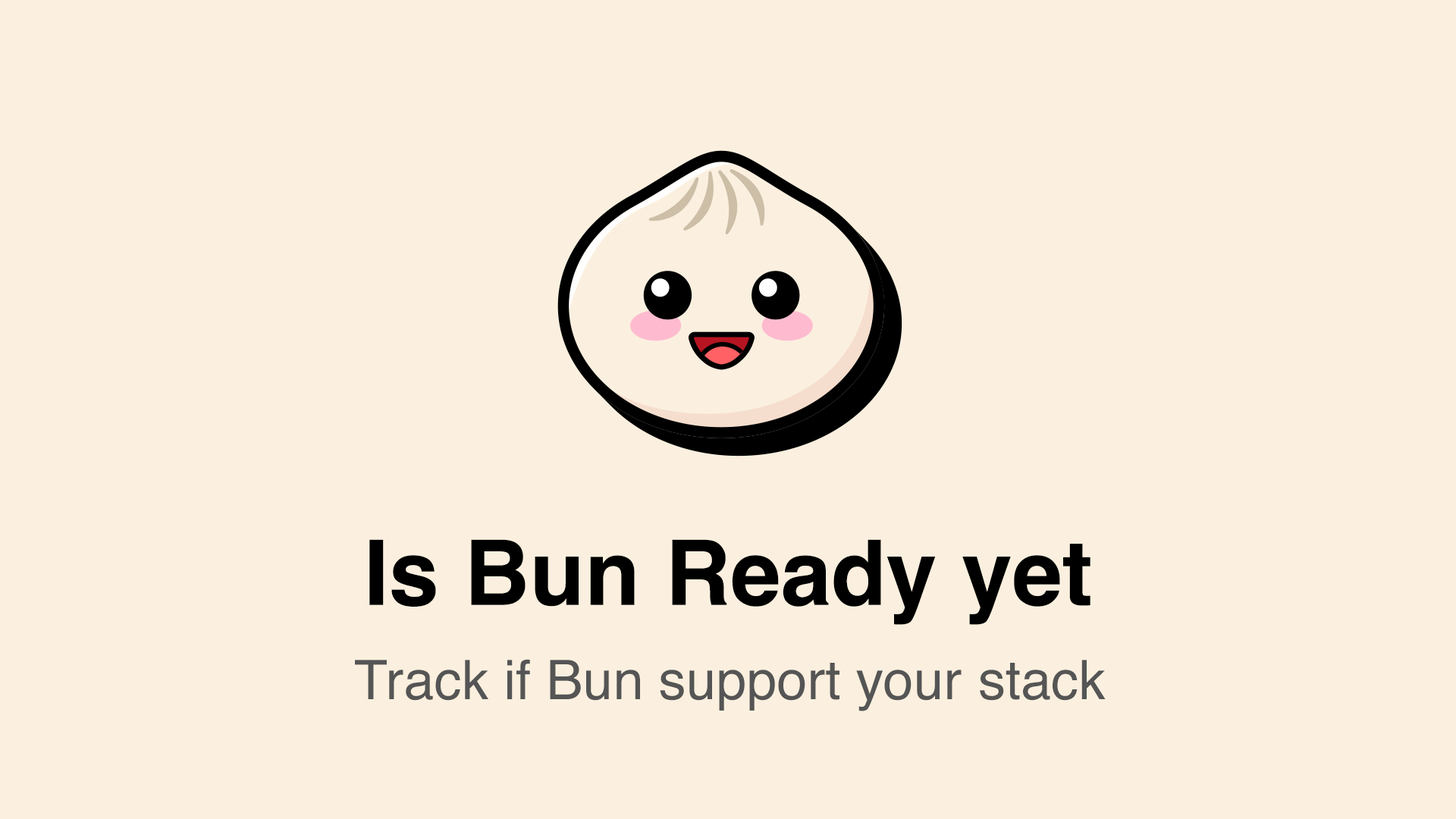
<style>
.page{position:relative;width:1456px;height:819px;background:#fbf0df}
.page>*{position:absolute;margin:0}
.t1{font:90.5px "Helvetica-Bold";color:#000000}
.t2{font:54.6px "Helvetica";color:#555555}
</style>
<div class="page">
<p class="t1" style="left:369px;top:539px;width:721px;height:86px">Is Bun Ready yet</p>
<p class="t2" style="left:355px;top:659px;width:751px;height:52px">Track if Bun support your stack</p>
</div>
